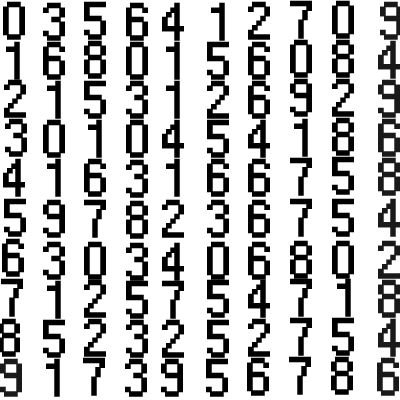
<style>
.page{position:relative;width:400px;height:400px;background:#ffffff}
.page>*{position:absolute;margin:0}
.t1{font:49.6px "Small Fonts";color:#000000;font-weight:bold;scale:1.04 1}
.t2{font:49.6px "Small Fonts";color:#191919;font-weight:bold;scale:1.04 1}
</style>
<div class="page">
<p class="t1" style="left:3px;top:1px;width:22px;height:39px">0</p>
<p class="t1" style="left:43px;top:2px;width:22px;height:39px">3</p>
<p class="t1" style="left:84px;top:1px;width:22px;height:39px">5</p>
<p class="t1" style="left:126px;top:2px;width:22px;height:39px">6</p>
<p class="t1" style="left:162px;top:2px;width:22px;height:39px">4</p>
<p class="t1" style="left:211px;top:2px;width:14px;height:39px">1</p>
<p class="t1" style="left:248px;top:1px;width:22px;height:39px">2</p>
<p class="t1" style="left:290px;top:0px;width:22px;height:39px">7</p>
<p class="t1" style="left:332px;top:0px;width:22px;height:39px">0</p>
<p class="t2" style="left:380px;top:1px;width:22px;height:39px">9</p>
<p class="t1" style="left:6px;top:41px;width:14px;height:39px">1</p>
<p class="t1" style="left:43px;top:41px;width:22px;height:39px">6</p>
<p class="t1" style="left:84px;top:40px;width:22px;height:39px">8</p>
<p class="t1" style="left:126px;top:41px;width:22px;height:39px">0</p>
<p class="t1" style="left:166px;top:41px;width:14px;height:39px">1</p>
<p class="t1" style="left:207px;top:41px;width:22px;height:39px">5</p>
<p class="t1" style="left:248px;top:41px;width:22px;height:39px">6</p>
<p class="t1" style="left:290px;top:39px;width:22px;height:39px">0</p>
<p class="t1" style="left:332px;top:39px;width:22px;height:39px">8</p>
<p class="t2" style="left:378px;top:40px;width:22px;height:39px">4</p>
<p class="t1" style="left:290px;top:78px;width:22px;height:39px">9</p>
<p class="t1" style="left:332px;top:78px;width:22px;height:39px">2</p>
<p class="t1" style="left:4px;top:79px;width:22px;height:39px">2</p>
<p class="t1" style="left:47px;top:80px;width:14px;height:39px">1</p>
<p class="t1" style="left:84px;top:80px;width:22px;height:39px">5</p>
<p class="t1" style="left:126px;top:80px;width:22px;height:39px">3</p>
<p class="t1" style="left:166px;top:80px;width:14px;height:39px">1</p>
<p class="t1" style="left:207px;top:80px;width:22px;height:39px">2</p>
<p class="t1" style="left:248px;top:80px;width:22px;height:39px">6</p>
<p class="t2" style="left:378px;top:79px;width:22px;height:39px">9</p>
<p class="t1" style="left:5px;top:118px;width:22px;height:39px">3</p>
<p class="t1" style="left:43px;top:119px;width:22px;height:39px">0</p>
<p class="t1" style="left:88px;top:119px;width:14px;height:39px">1</p>
<p class="t1" style="left:126px;top:119px;width:22px;height:39px">0</p>
<p class="t1" style="left:162px;top:119px;width:22px;height:39px">4</p>
<p class="t1" style="left:207px;top:119px;width:22px;height:39px">5</p>
<p class="t1" style="left:248px;top:119px;width:22px;height:39px">4</p>
<p class="t1" style="left:294px;top:118px;width:14px;height:39px">1</p>
<p class="t1" style="left:332px;top:117px;width:22px;height:39px">8</p>
<p class="t2" style="left:378px;top:118px;width:22px;height:39px">6</p>
<p class="t1" style="left:3px;top:158px;width:22px;height:39px">4</p>
<p class="t1" style="left:47px;top:158px;width:14px;height:39px">1</p>
<p class="t1" style="left:84px;top:158px;width:22px;height:39px">6</p>
<p class="t1" style="left:126px;top:159px;width:22px;height:39px">3</p>
<p class="t1" style="left:166px;top:158px;width:14px;height:39px">1</p>
<p class="t1" style="left:207px;top:158px;width:22px;height:39px">6</p>
<p class="t1" style="left:248px;top:158px;width:22px;height:39px">6</p>
<p class="t1" style="left:290px;top:157px;width:22px;height:39px">7</p>
<p class="t1" style="left:332px;top:156px;width:22px;height:39px">5</p>
<p class="t2" style="left:378px;top:157px;width:22px;height:39px">8</p>
<p class="t1" style="left:4px;top:198px;width:22px;height:39px">5</p>
<p class="t1" style="left:290px;top:198px;width:22px;height:39px">7</p>
<p class="t1" style="left:332px;top:198px;width:22px;height:39px">5</p>
<p class="t2" style="left:378px;top:198px;width:22px;height:39px">4</p>
<p class="t1" style="left:43px;top:199px;width:22px;height:39px">9</p>
<p class="t1" style="left:84px;top:199px;width:22px;height:39px">7</p>
<p class="t1" style="left:126px;top:200px;width:22px;height:39px">8</p>
<p class="t1" style="left:162px;top:199px;width:22px;height:39px">2</p>
<p class="t1" style="left:207px;top:199px;width:22px;height:39px">3</p>
<p class="t1" style="left:248px;top:199px;width:22px;height:39px">6</p>
<p class="t1" style="left:2px;top:238px;width:22px;height:39px">6</p>
<p class="t1" style="left:43px;top:241px;width:22px;height:39px">3</p>
<p class="t1" style="left:84px;top:241px;width:22px;height:39px">0</p>
<p class="t1" style="left:126px;top:242px;width:22px;height:39px">3</p>
<p class="t1" style="left:162px;top:242px;width:22px;height:39px">4</p>
<p class="t1" style="left:207px;top:241px;width:22px;height:39px">0</p>
<p class="t1" style="left:248px;top:241px;width:22px;height:39px">6</p>
<p class="t1" style="left:290px;top:240px;width:22px;height:39px">8</p>
<p class="t1" style="left:332px;top:240px;width:22px;height:39px">0</p>
<p class="t2" style="left:378px;top:240px;width:22px;height:39px">2</p>
<p class="t1" style="left:1px;top:278px;width:22px;height:39px">7</p>
<p class="t1" style="left:47px;top:280px;width:14px;height:39px">1</p>
<p class="t1" style="left:84px;top:279px;width:22px;height:39px">2</p>
<p class="t1" style="left:126px;top:280px;width:22px;height:39px">5</p>
<p class="t1" style="left:162px;top:280px;width:22px;height:39px">7</p>
<p class="t1" style="left:207px;top:279px;width:22px;height:39px">5</p>
<p class="t1" style="left:248px;top:279px;width:22px;height:39px">4</p>
<p class="t1" style="left:290px;top:278px;width:22px;height:39px">7</p>
<p class="t1" style="left:337px;top:278px;width:14px;height:39px">1</p>
<p class="t2" style="left:378px;top:279px;width:22px;height:39px">8</p>
<p class="t1" style="left:0px;top:318px;width:20px;height:39px">8</p>
<p class="t1" style="left:84px;top:318px;width:22px;height:39px">2</p>
<p class="t1" style="left:248px;top:318px;width:22px;height:39px">2</p>
<p class="t1" style="left:290px;top:317px;width:22px;height:39px">7</p>
<p class="t1" style="left:332px;top:317px;width:22px;height:39px">5</p>
<p class="t2" style="left:378px;top:318px;width:22px;height:39px">4</p>
<p class="t1" style="left:43px;top:319px;width:22px;height:39px">5</p>
<p class="t1" style="left:126px;top:319px;width:22px;height:39px">3</p>
<p class="t1" style="left:162px;top:319px;width:22px;height:39px">2</p>
<p class="t1" style="left:207px;top:319px;width:22px;height:39px">5</p>
<p class="t2" style="left:0px;top:358px;width:22px;height:39px">9</p>
<p class="t1" style="left:46px;top:358px;width:14px;height:39px">1</p>
<p class="t1" style="left:83px;top:357px;width:22px;height:39px">7</p>
<p class="t1" style="left:125px;top:358px;width:22px;height:39px">3</p>
<p class="t1" style="left:161px;top:358px;width:22px;height:39px">9</p>
<p class="t1" style="left:206px;top:358px;width:22px;height:39px">5</p>
<p class="t1" style="left:247px;top:357px;width:22px;height:39px">6</p>
<p class="t1" style="left:289px;top:356px;width:22px;height:39px">7</p>
<p class="t1" style="left:331px;top:356px;width:22px;height:39px">8</p>
<p class="t2" style="left:377px;top:357px;width:22px;height:39px">6</p>
</div>
